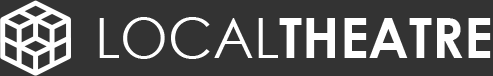
<style>
.page{position:relative;width:493px;height:76px;background:#333333}
.page>*{position:absolute;margin:0}
.t1{font:55px "CenturyGothic-Bold";color:#ffffff}
.t2{font:55px "CenturyGothic";color:#ffffff}
</style>
<div class="page">
<p class="t1" style="left:99px;top:17px;width:392px;height:42px"><span class="t2">LOCAL</span>THEATRE</p>
</div>
